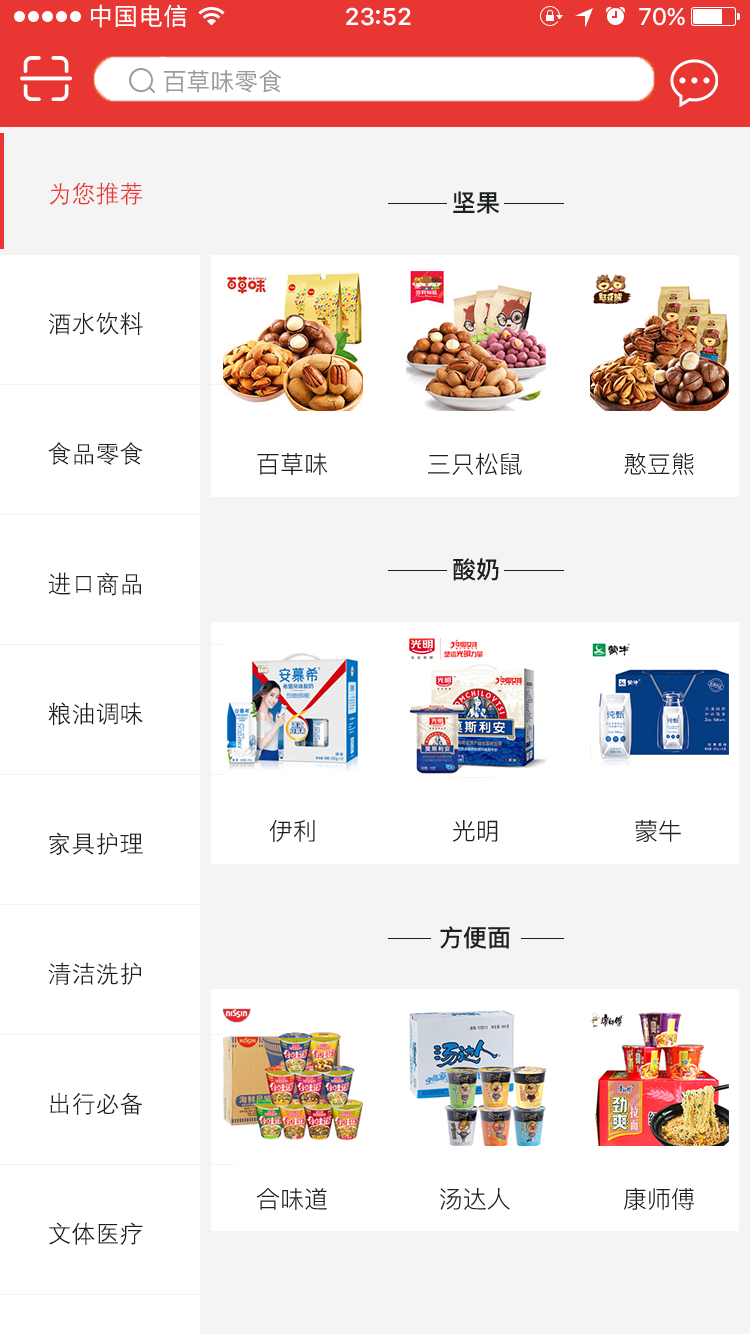
<style>
.page{position:relative;width:750px;height:1334px;background:#ffffff}
.page>*{position:absolute;margin:0}
.t1{font:24px/130px "DengXian";color:#1c201f}
.t2{font:24px/130px "DengXian";color:#e83632}
.t3{font:24px "PingFang-SC-Bold";color:#1c201f}
.t4{font:24px "PingFang-SC-Regular";color:#1c201f}
</style>
<div class="page">
<p class="t1" style="left:48px;top:182px;width:95px;height:1063px"><span class="t2">为您推荐<br></span>酒水饮料<br>食品零食<br>进口商品<br>粮油调味<br>家具护理<br>清洁洗护<br>出行必备<br>文体医疗</p>
<p class="t3" style="left:453px;top:191px;width:46px;height:23px">坚果</p>
<p class="t4" style="left:257px;top:453px;width:71px;height:22px">百草味</p>
<p class="t4" style="left:428px;top:453px;width:94px;height:22px">三只松鼠</p>
<p class="t4" style="left:624px;top:452px;width:70px;height:23px">憨豆熊</p>
<p class="t3" style="left:453px;top:558px;width:46px;height:23px">酸奶</p>
<p class="t4" style="left:269px;top:819px;width:46px;height:23px">伊利</p>
<p class="t4" style="left:452px;top:820px;width:46px;height:22px">光明</p>
<p class="t4" style="left:635px;top:820px;width:46px;height:22px">蒙牛</p>
<p class="t3" style="left:440px;top:926px;width:70px;height:23px">方便面</p>
<p class="t4" style="left:256px;top:1188px;width:71px;height:22px">合味道</p>
<p class="t4" style="left:440px;top:1188px;width:70px;height:22px">汤达人</p>
<p class="t4" style="left:624px;top:1187px;width:70px;height:23px">康师傅</p>
</div>
